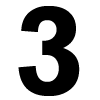
<style>
.page{position:relative;width:100px;height:100px;background:#ffffff}
.page>*{position:absolute;margin:0}
.t1{font:129.9px "Rockwell-Bold";color:#000000}
</style>
<div class="page">
<p class="t1" style="left:18px;top:6px;width:62px;height:90px">3</p>
</div>
